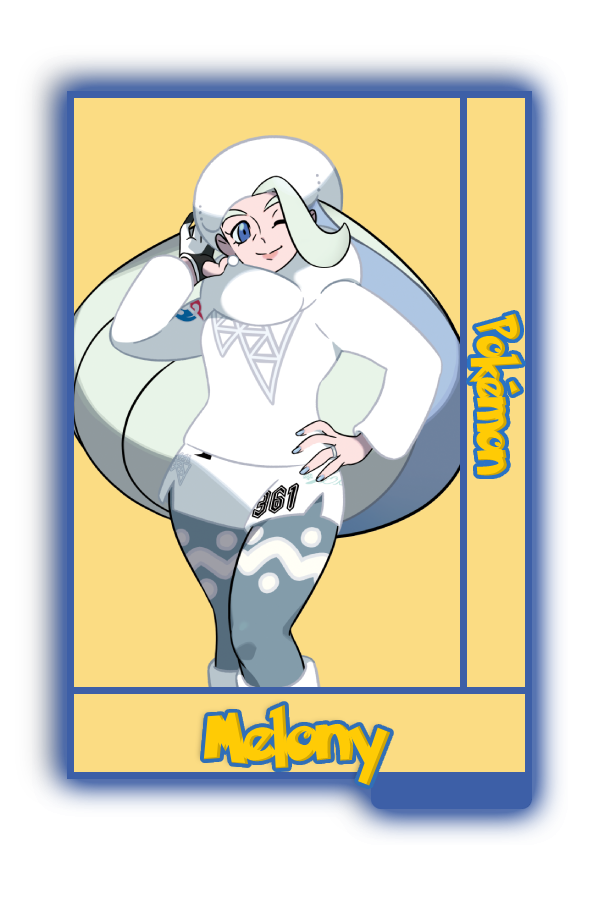
<style>
.page{position:relative;width:600px;height:900px;background:#ffffff}
.page>*{position:absolute;margin:0}
.t1{font:48.8px "PokemonSolidNormal";color:#ffcb05;scale:0.8 1}
.t2{font:60.1px "PokemonSolidNormal";color:#ffcb05;scale:0.96 1}
</style>
<div class="page">
<p class="t1" style="left:469px;top:313px;width:54px;height:163px;rotate:90deg">Pokémon</p>
<p class="t2" style="left:203px;top:704px;width:188px;height:82px">Melony</p>
</div>
